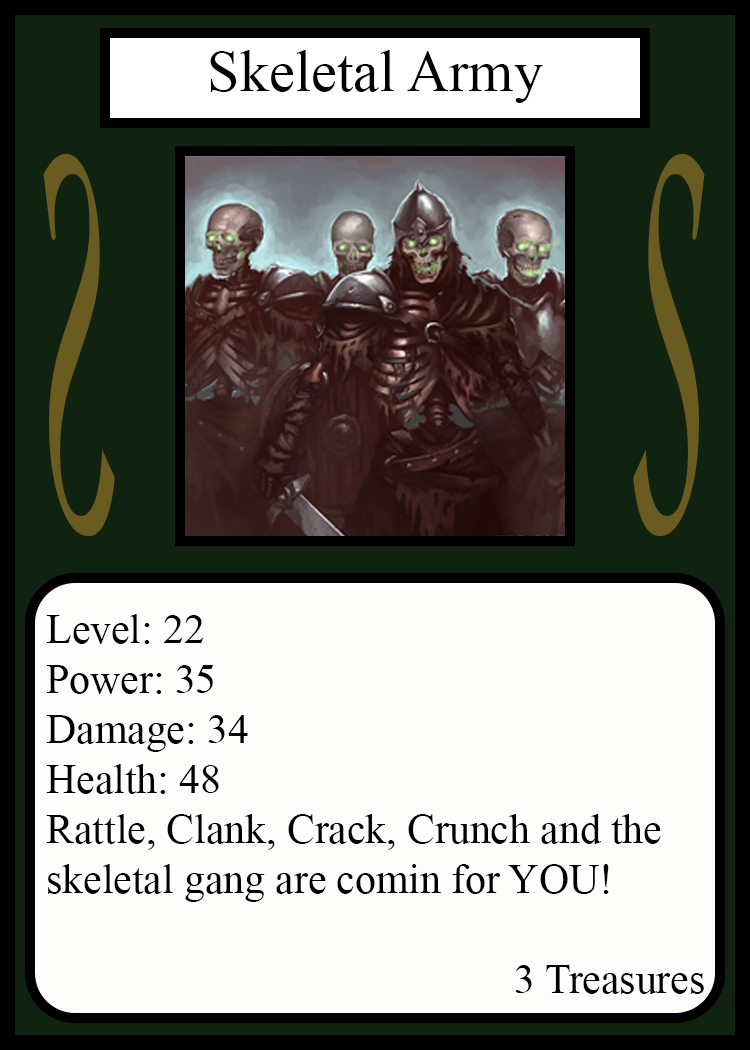
<style>
.page{position:relative;width:750px;height:1050px;background:#fffcfc}
.page>*{position:absolute;margin:0}
.t1{font:58.3px "TimesNewRomanPSMT";color:#010101}
.t2{font:548.5px "Apple-Chancery";color:#6a5c21;scale:0.27 1}
.t3{font:548.2px "Apple-Chancery";color:#6a5c21;scale:0.27 1}
.t4{font:41.7px "TimesNewRomanPSMT";color:#000000}
</style>
<div class="page">
<p class="t1" style="left:210px;top:50px;width:333px;height:53px">Skeletal Army</p>
<p class="t2" style="left:43px;top:154px;width:72px;height:382px;rotate:180deg">S</p>
<p class="t3" style="left:633px;top:154px;width:72px;height:382px">S</p>
<p class="t4" style="left:46px;top:614px;width:658px;height:380px">Level: 22<br>Power: 35<br>Damage: 34<br>Health: 48<br>Rattle, Clank, Crack, Crunch and the<br>skeletal gang are comin for YOU!<br><br>             3 Treasures</p>
</div>
